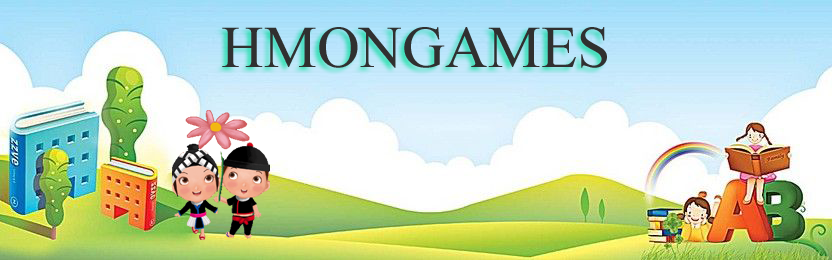
<style>
.page{position:relative;width:832px;height:260px}
.page>*{position:absolute;margin:0}
.t1{font:59.3px "TimesNewRomanPSMT";color:#303030}
</style>
<div class="page">
<p class="t1" style="left:222px;top:27px;width:385px;height:41px">HMONGAMES</p>
</div>
